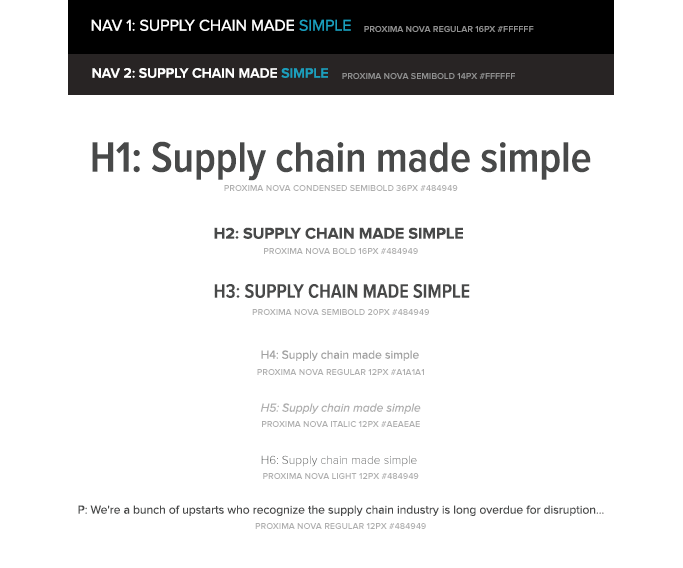
<style>
.page{position:relative;width:683px;height:568px;background:#ffffff}
.page>*{position:absolute;margin:0}
.t1{font:16px "ProximaNova-Regular";color:#ffffff}
.t2{font:16px "ProximaNova-Regular";color:#1b9ebc}
.t3{font:9px "ProximaNova-Semibold";color:#929292}
.t4{font:14px "ProximaNova-Semibold";color:#ffffff}
.t5{font:14px "ProximaNova-Semibold";color:#1b9ebc}
.t6{font:44px "ProximaNovaCond-Semibold";color:#484949}
.t7{font:9px "ProximaNova-Semibold";color:#aeaeae}
.t8{font:16px "ProximaNova-Bold";color:#484949}
.t9{font:20px "ProximaNovaCond-Semibold";color:#484949}
.t10{font:12px "ProximaNova-Regular";color:#a1a1a1}
.t11{font:12px "ProximaNova-RegularIt";color:#aeaeae}
.t12{font:12px "ProximaNova-Light"}
.t13{font:12px "ProximaNova-Regular";color:#484949}
</style>
<div class="page">
<p class="t1" style="left:91px;top:19px;width:260px;height:12px">NAV 1: SUPPLY CHAIN MADE <span class="t2">SIMPLE</span></p>
<p class="t3" style="left:364px;top:26px;width:170px;height:6px">PROXIMA NOVA REGULAR 16PX #FFFFFF</p>
<p class="t4" style="left:92px;top:68px;width:236px;height:10px">NAV 2: SUPPLY CHAIN MADE <span class="t5">SIMPLE</span></p>
<p class="t3" style="left:342px;top:73px;width:173px;height:6px">PROXIMA NOVA SEMIBOLD 14PX #FFFFFF</p>
<p class="t6" style="left:92px;top:141px;width:499px;height:40px">H1: Supply chain made simple</p>
<p class="t7" style="left:224px;top:185px;width:234px;height:6px">PROXIMA NOVA CONDENSED SEMIBOLD 36PX #484949</p>
<p class="t8" style="left:214px;top:227px;width:249px;height:12px">H2: SUPPLY CHAIN MADE SIMPLE</p>
<p class="t7" style="left:264px;top:248px;width:154px;height:6px">PROXIMA NOVA BOLD 16PX #484949</p>
<p class="t9" style="left:214px;top:284px;width:256px;height:14px">H3: SUPPLY CHAIN MADE SIMPLE</p>
<p class="t7" style="left:252px;top:309px;width:177px;height:6px">PROXIMA NOVA SEMIBOLD 20PX #484949</p>
<p class="t10" style="left:261px;top:350px;width:158px;height:11px">H4: Supply chain made simple</p>
<p class="t7" style="left:257px;top:369px;width:167px;height:6px">PROXIMA NOVA REGULAR 12PX #A1A1A1</p>
<p class="t11" style="left:260px;top:403px;width:161px;height:11px">H5: Supply chain made simple</p>
<p class="t7" style="left:262px;top:421px;width:158px;height:6px">PROXIMA NOVA ITALIC 12PX #AEAEAE</p>
<p class="t12" style="left:261px;top:455px;width:156px;height:12px">H6: Supply chain made simple</p>
<p class="t7" style="left:263px;top:473px;width:156px;height:6px">PROXIMA NOVA LIGHT 12PX #484949</p>
<p class="t13" style="left:78px;top:505px;width:526px;height:11px">P: We're a bunch of upstarts who recognize the supply chain industry is long overdue for disruption...</p>
<p class="t7" style="left:255px;top:523px;width:171px;height:6px">PROXIMA NOVA REGULAR 12PX #484949</p>
</div>
